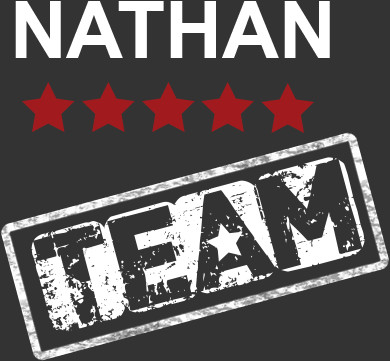
<style>
.page{position:relative;width:390px;height:361px;background:#333333}
.page>*{position:absolute;margin:0}
.t1{font:78.6px "Arial-BoldMT";color:#ffffff}
.t2{font:118.6px "CFPunkisnotDead-Regular";color:#ffffff}
</style>
<div class="page">
<p class="t1" style="left:15px;top:1px;width:315px;height:57px">NATHAN</p>
<p class="t2" style="left:31px;top:157px;width:334px;height:175px;rotate:-15deg">team</p>
</div>
